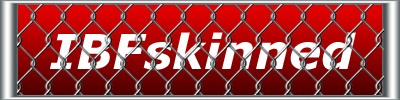
<style>
.page{position:relative;width:400px;height:100px}
.page>*{position:absolute;margin:0}
.t1{font:48px "Verdana-BoldItalic";color:#ffffff}
</style>
<div class="page">
<p class="t1" style="left:50px;top:32px;width:306px;height:38px">IBFskinned</p>
</div>
